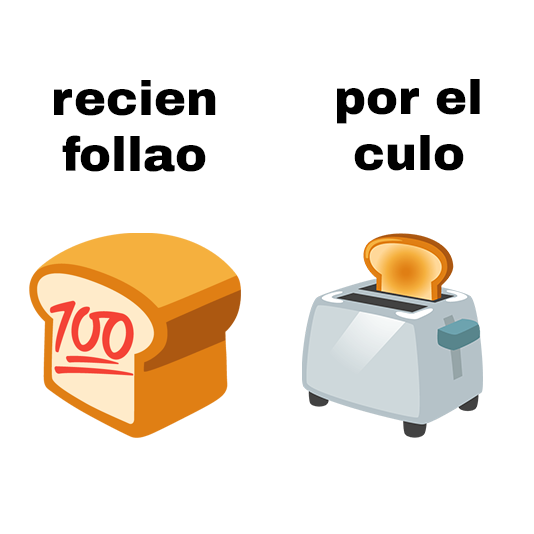
<style>
.page{position:relative;width:534px;height:534px;background:#ffffff}
.page>*{position:absolute;margin:0}
.t1{font:48px "ArchivoBlack-Regular";color:#000000}
</style>
<div class="page">
<p class="t1" style="left:54px;top:80px;width:162px;height:92px;text-align:center">recien<br>follao</p>
<p class="t1" style="left:337px;top:79px;width:143px;height:92px;text-align:center">por el<br>culo</p>
</div>
